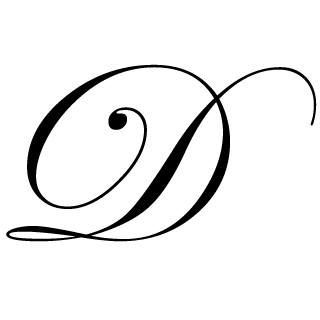
<style>
.page{position:relative;width:320px;height:320px;background:#ffffff}
.page>*{position:absolute;margin:0}
.t1{font:260px "EdwardianScriptITC";color:#000000}
</style>
<div class="page">
<p class="t1" style="left:6px;top:64px;width:311px;height:178px">D</p>
</div>
